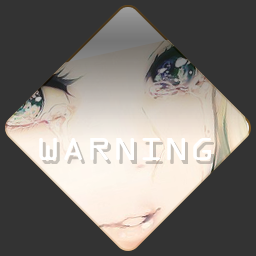
<style>
.page{position:relative;width:256px;height:256px;background:#333333}
.page>*{position:absolute;margin:0}
.t1{font:34px "OCRAExtended";color:#ffffff;scale:1.25 1}
</style>
<div class="page">
<p class="t1" style="left:39px;top:138px;width:172px;height:22px">WARNING</p>
</div>
